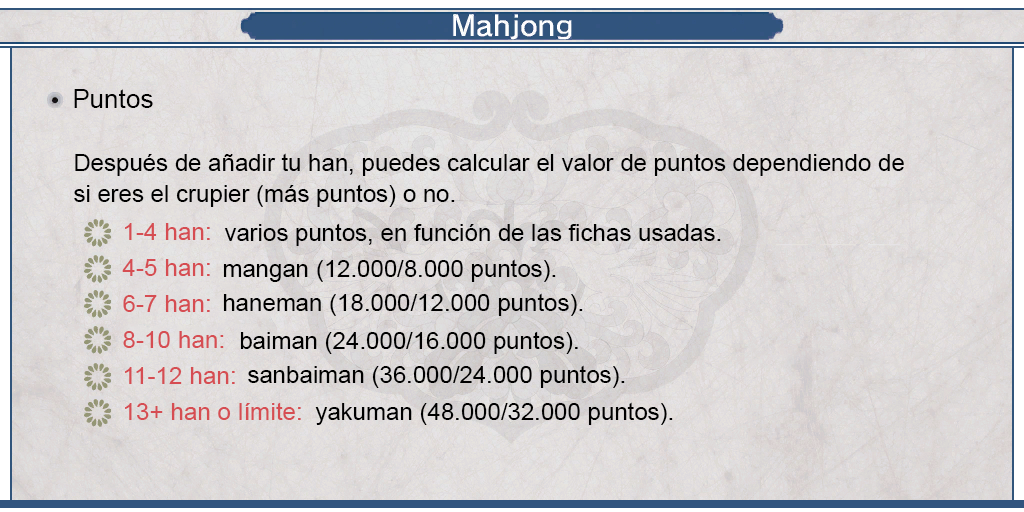
<style>
.page{position:relative;width:1024px;height:512px}
.page>*{position:absolute;margin:0}
.t1{font:26px "ArialMT";color:#000000}
.t2{font:24px/31px "ArialMT";color:#000000}
.t3{font:24px/36px "ArialMT";color:#d64d52}
.t4{font:24px "ArialMT";color:#000000}
</style>
<div class="page">
<p class="t1" style="left:74px;top:89px;width:79px;height:19px">Puntos</p>
<p class="t2" style="left:74px;top:153px;width:830px;height:54px;text-align:justify">Después de añadir tu han, puedes calcular el valor de puntos dependiendo de<br>si eres el crupier (más puntos) o no.</p>
<p class="t3" style="left:122px;top:223px;width:179px;height:197px;text-align:justify">1-4 han:<br>4-5 han:<br>6-7 han:<br>8-10 han:<br>11-12 han:<br>13+ han o límite:</p>
<p class="t4" style="left:224px;top:223px;width:497px;height:23px">varios puntos, en función de las fichas usadas.</p>
<p class="t4" style="left:223px;top:259px;width:333px;height:23px">mangan (12.000/8.000 puntos).</p>
<p class="t4" style="left:223px;top:293px;width:360px;height:23px">haneman (18.000/12.000 puntos).</p>
<p class="t4" style="left:240px;top:331px;width:338px;height:23px">baiman (24.000/16.000 puntos).</p>
<p class="t4" style="left:248px;top:365px;width:377px;height:23px">sanbaiman (36.000/24.000 puntos).</p>
<p class="t4" style="left:315px;top:402px;width:358px;height:23px">yakuman (48.000/32.000 puntos).</p>
</div>
